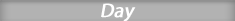
<style>
.page{position:relative;width:235px;height:21px;background:#b2b2b2}
.page>*{position:absolute;margin:0}
.t1{font:20px "MyriadPro-Regular";color:#ffffff;font-weight:bold;font-style:italic}
</style>
<div class="page">
<p class="t1" style="left:101px;top:3px;width:35px;height:19px">Day</p>
</div>
